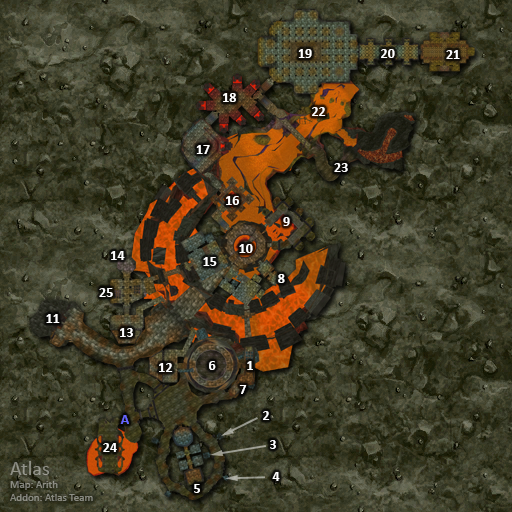
<style>
.page{position:relative;width:512px;height:512px}
.page>*{position:absolute;margin:0}
.t1{font:14px "Calibri-Bold";color:#ffffff}
.t2{font:14px "Calibri-Bold";color:#6666ff}
.t3{font:11px "Calibri";color:#8b8b82}
.t4{font:20px "Calibri";color:#8b8b82}
</style>
<div class="page">
<p class="t1" style="left:298px;top:49px;width:14px;height:9px">19</p>
<p class="t1" style="left:381px;top:49px;width:14px;height:9px">20</p>
<p class="t1" style="left:446px;top:50px;width:14px;height:9px">21</p>
<p class="t1" style="left:223px;top:93px;width:13px;height:9px">18</p>
<p class="t1" style="left:312px;top:107px;width:14px;height:9px">22</p>
<p class="t1" style="left:196px;top:145px;width:14px;height:9px">17</p>
<p class="t1" style="left:334px;top:163px;width:14px;height:9px">23</p>
<p class="t1" style="left:226px;top:196px;width:13px;height:9px">16</p>
<p class="t1" style="left:283px;top:217px;width:7px;height:9px">9</p>
<p class="t1" style="left:239px;top:244px;width:14px;height:9px">10</p>
<p class="t1" style="left:111px;top:251px;width:14px;height:9px">14</p>
<p class="t1" style="left:203px;top:257px;width:14px;height:9px">15</p>
<p class="t1" style="left:278px;top:274px;width:7px;height:9px">8</p>
<p class="t1" style="left:99px;top:288px;width:14px;height:9px">25</p>
<p class="t1" style="left:46px;top:314px;width:14px;height:9px">11</p>
<p class="t1" style="left:120px;top:328px;width:13px;height:9px">13</p>
<p class="t1" style="left:159px;top:363px;width:14px;height:9px">12</p>
<p class="t1" style="left:209px;top:361px;width:7px;height:9px">6</p>
<p class="t1" style="left:247px;top:361px;width:6px;height:9px">1</p>
<p class="t1" style="left:239px;top:385px;width:8px;height:9px">7</p>
<p class="t1" style="left:263px;top:411px;width:7px;height:9px">2</p>
<p class="t2" style="left:120px;top:415px;width:9px;height:9px">A</p>
<p class="t1" style="left:103px;top:443px;width:14px;height:9px">24</p>
<p class="t1" style="left:270px;top:440px;width:6px;height:9px">3</p>
<p class="t3" style="left:10px;top:461px;width:83px;height:40px"><span class="t4">Atlas<br></span>Map: Arith<br>Addon: Atlas Team</p>
<p class="t1" style="left:272px;top:472px;width:8px;height:9px">4</p>
<p class="t1" style="left:194px;top:484px;width:6px;height:9px">5</p>
</div>
